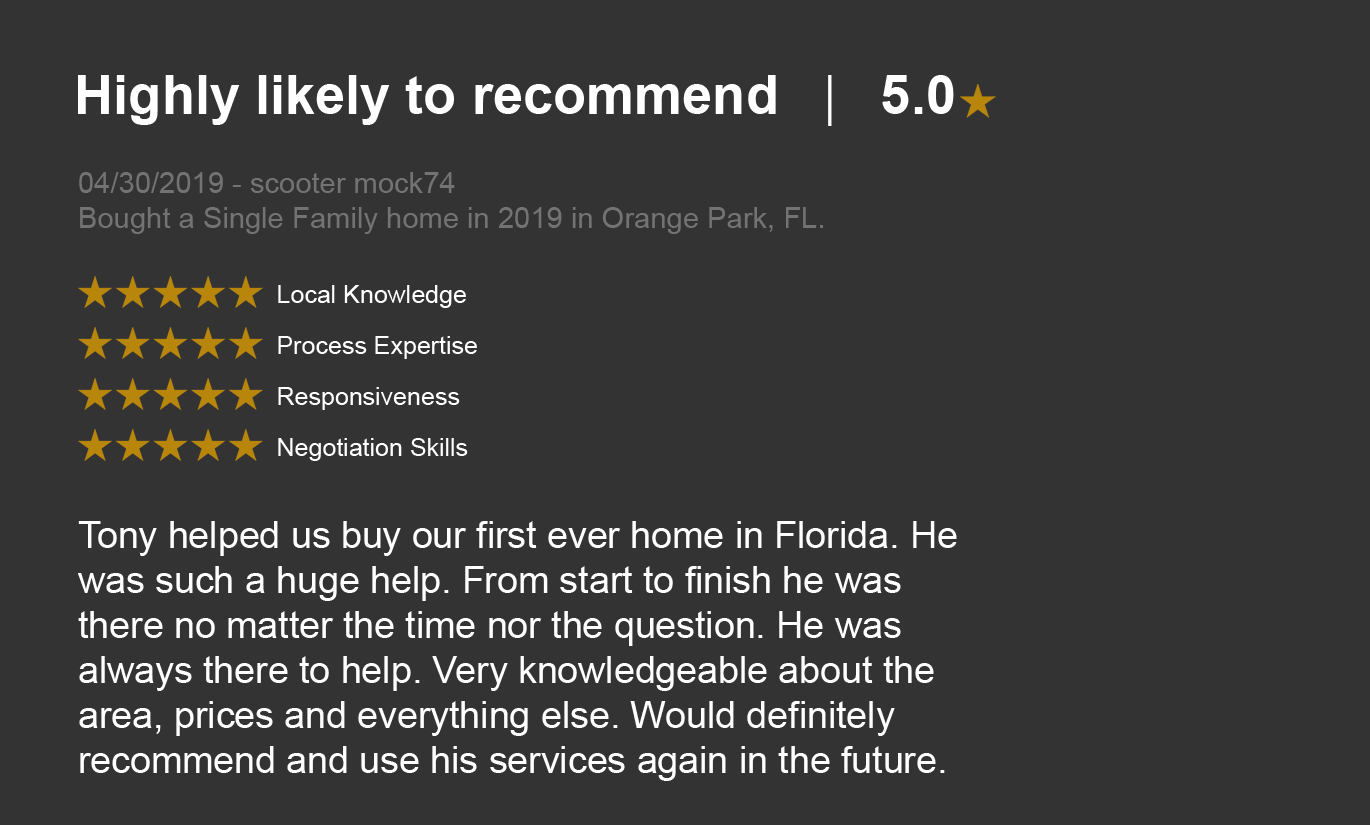
<style>
.page{position:relative;width:1370px;height:825px;background:#333333}
.page>*{position:absolute;margin:0}
.t1{font:29.2px "ArialMT";color:#737373}
.t2{font:25px "ArialMT";color:#ffffff}
.t3{font:37.5px "ArialMT";color:#ffffff}
</style>
<div class="page">
<p class="t1" style="left:79px;top:172px;width:744px;height:62px">04/30/2019 - scooter mock74<br>Bought a Single Family home in 2019 in Orange Park, FL.</p>
<p class="t2" style="left:278px;top:285px;width:188px;height:23px">Local Knowledge</p>
<p class="t2" style="left:278px;top:336px;width:199px;height:23px">Process Expertise</p>
<p class="t2" style="left:278px;top:387px;width:182px;height:23px">Responsiveness</p>
<p class="t2" style="left:278px;top:438px;width:190px;height:23px">Negotiation Skills</p>
<p class="t3" style="left:78px;top:521px;width:879px;height:260px">Tony helped us buy our first ever home in Florida. He was such a huge help. From start to finish he was there no matter the time nor the question. He was always there to help. Very knowledgeable about the area, prices and everything else. Would definitely recommend and use his services again in the future.</p>
</div>
